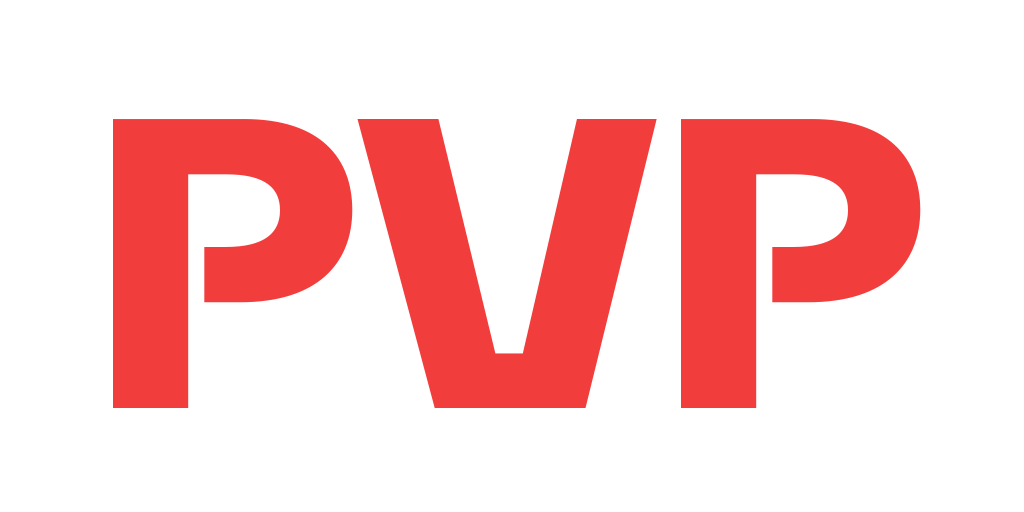
<style>
.page{position:relative;width:1024px;height:512px;background:#ffffff}
.page>*{position:absolute;margin:0}
.t1{font:404.2px "EcoSansPro-83HeavyExtended";letter-spacing:0.02em;color:#f23d3d}
</style>
<div class="page">
<p class="t1" style="left:113px;top:119px;width:808px;height:289px">PVP</p>
</div>
